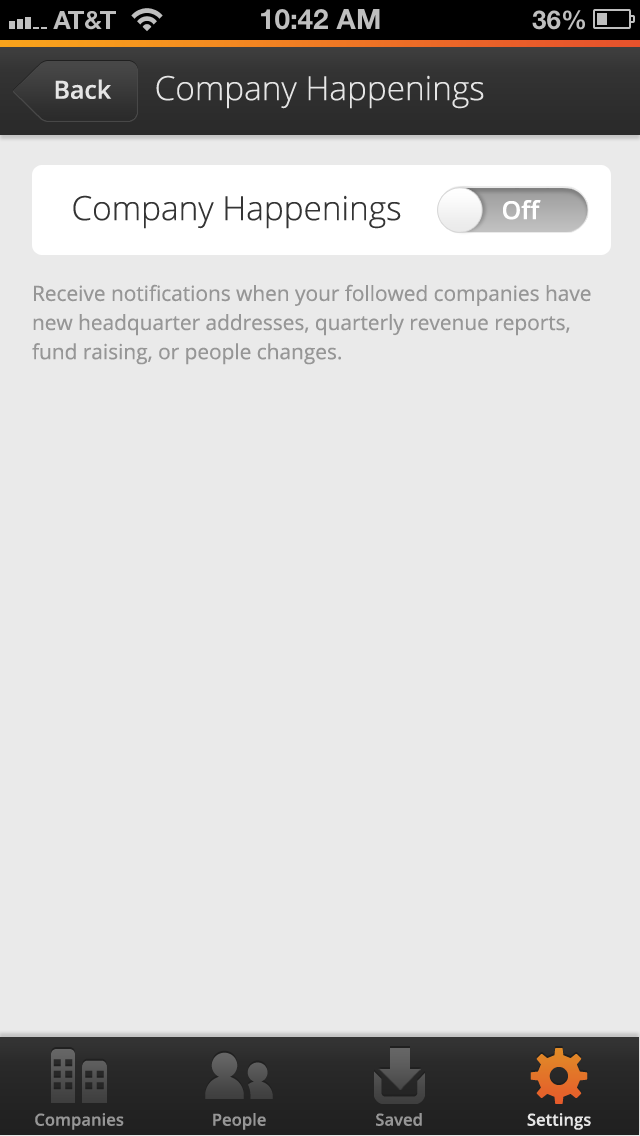
<style>
.page{position:relative;width:640px;height:1136px;background:#eaeaea}
.page>*{position:absolute;margin:0}
.t1{font:33.3px "OpenSans-Light";color:#e5e5e5}
.t2{font:25px "OpenSans-Semibold";color:#e5e5e5}
.t3{font:33.3px "OpenSans-Light";color:#343434}
.t4{font:25px "OpenSans-Semibold";color:#ffffff}
.t5{font:20.8px/29.2px "OpenSans";color:#969696}
.t6{font:16.7px "OpenSans-Semibold";color:#969696}
.t7{font:16.7px "OpenSans-Semibold";color:#e5e5e5}
</style>
<div class="page">
<p class="t1" style="left:156px;top:75px;width:328px;height:34px">Company Happenings</p>
<p class="t2" style="left:55px;top:79px;width:57px;height:20px">Back</p>
<p class="t3" style="left:73px;top:195px;width:328px;height:34px">Company Happenings</p>
<p class="t4" style="left:503px;top:200px;width:38px;height:20px">Off</p>
<p class="t5" style="left:32px;top:284px;width:559px;height:81px">Receive notifications when your followed companies have new headquarter addresses, quarterly revenue reports, fund raising, or people changes.</p>
<p class="t6" style="left:35px;top:1113px;width:89px;height:17px">Companies</p>
<p class="t6" style="left:213px;top:1113px;width:53px;height:17px">People</p>
<p class="t6" style="left:376px;top:1113px;width:46px;height:13px">Saved</p>
<p class="t7" style="left:527px;top:1113px;width:64px;height:17px">Settings</p>
</div>
